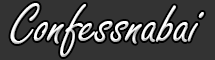
<style>
.page{position:relative;width:215px;height:60px;background:#333333}
.page>*{position:absolute;margin:0}
.t1{font:60px "FreestyleScript-Regular";color:#ffffff}
</style>
<div class="page">
<p class="t1" style="left:10px;top:3px;width:194px;height:54px">Confessnabai</p>
</div>
